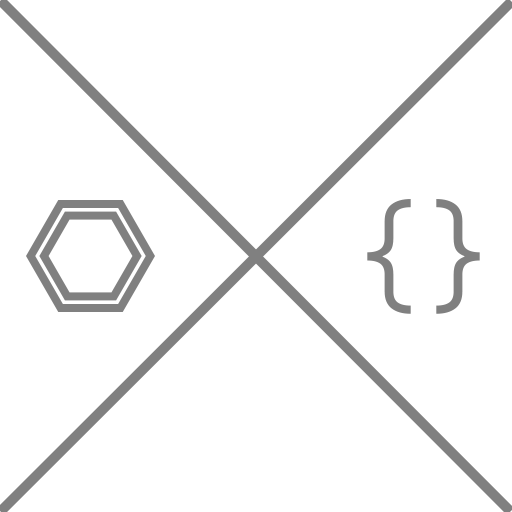
<style>
.page{position:relative;width:512px;height:512px;background:#ffffff}
.page>*{position:absolute;margin:0}
.t1{font:130px "Monoid-Retina";color:#808080}
</style>
<div class="page">
<p class="t1" style="left:367px;top:199px;width:113px;height:115px">{}</p>
</div>
